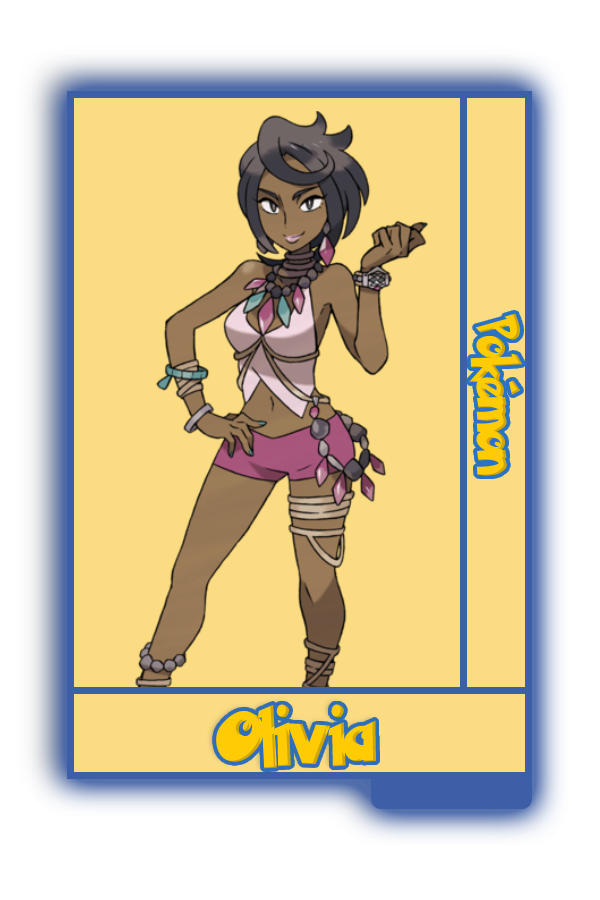
<style>
.page{position:relative;width:600px;height:900px;background:#fbdc83}
.page>*{position:absolute;margin:0}
.t1{font:48.8px "PokemonSolidNormal";color:#ffcb05;scale:0.8 1}
.t2{font:60.1px "PokemonSolidNormal";color:#ffcb05;scale:0.96 1}
</style>
<div class="page">
<p class="t1" style="left:469px;top:313px;width:54px;height:163px;rotate:90deg">Pokémon</p>
<p class="t2" style="left:216px;top:704px;width:161px;height:65px">Olivia</p>
</div>
